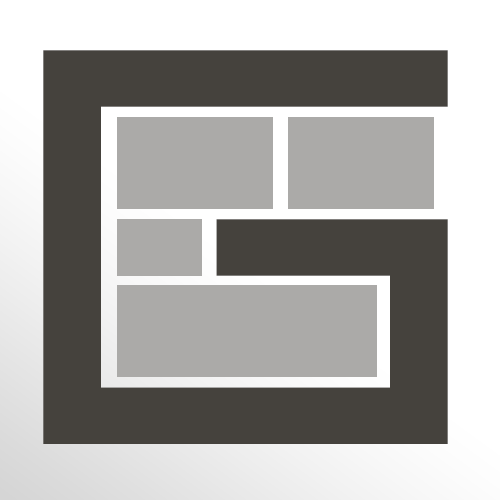
<style>
.page{position:relative;width:500px;height:500px;background:#45423d}
.page>*{position:absolute;margin:0}
.t1{font:562.3px "MGS2Menu";letter-spacing:0.025em;color:#45423d;scale:0.51 1}
</style>
<div class="page">
<p class="t1" style="left:43px;top:50px;width:405px;height:394px">G</p>
</div>
